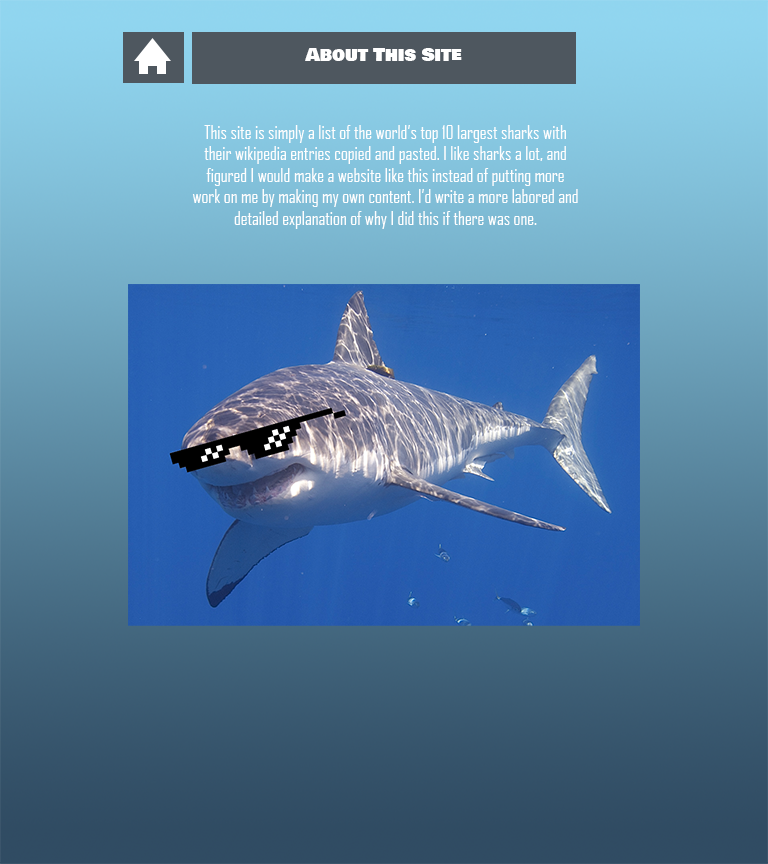
<style>
.page{position:relative;width:768px;height:864px}
.page>*{position:absolute;margin:0}
.t1{font:18px "BowlbyOneSC-Regular";color:#ffffff}
.t2{font:18px "AgencyFB-Reg";color:#fefefe}
</style>
<div class="page">
<p class="t1" style="left:305px;top:48px;width:157px;height:13px">About This Site</p>
<p class="t2" style="left:192px;top:125px;width:386px;height:104px;text-align:center">This site is simply a list of the world’s top 10 largest sharks with their wikipedia entries copied and pasted. I like sharks a lot, and figured I would make a website like this instead of putting more work on me by making my own content. I’d write a more labored and detailed explanation of why I did this if there was one.</p>
</div>
